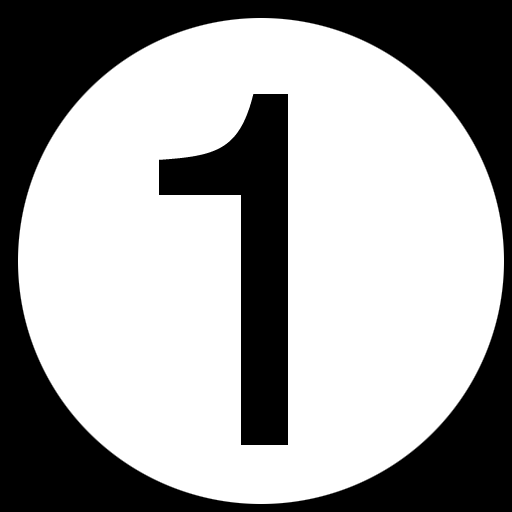
<style>
.page{position:relative;width:512px;height:512px;background:#ffffff}
.page>*{position:absolute;margin:0}
.t1{font:500px "Helvetica";color:#000000}
</style>
<div class="page">
<p class="t1" style="left:159px;top:94px;width:129px;height:351px">1</p>
</div>
